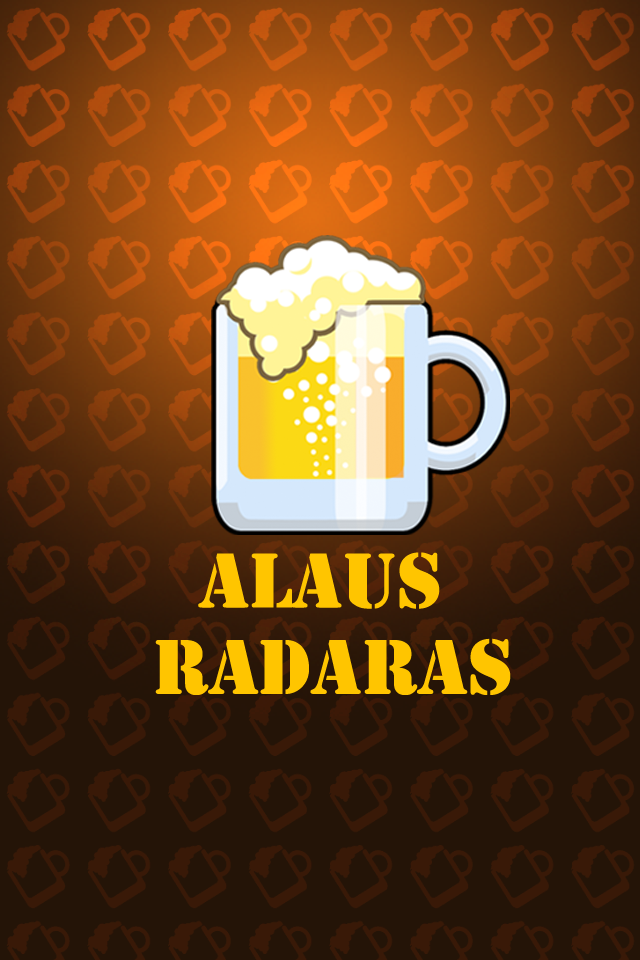
<style>
.page{position:relative;width:640px;height:960px;background:#241407}
.page>*{position:absolute;margin:0}
.t1{font:72px "StencilStd";color:#ffc500}
</style>
<div class="page">
<p class="t1" style="left:155px;top:552px;width:356px;height:143px;text-align:center">Alaus <br>radaras</p>
</div>
